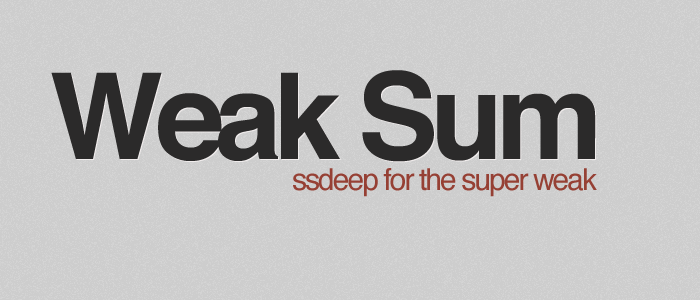
<style>
.page{position:relative;width:700px;height:300px;background:#cdcdcd}
.page>*{position:absolute;margin:0}
.t1{font:120px "Helvetica-Bold";letter-spacing:-0.065em;color:#2b2a2a}
.t2{font:30px "Helvetica";letter-spacing:-0.065em;color:#974035}
</style>
<div class="page">
<p class="t1" style="left:51px;top:70px;width:545px;height:92px">Weak Sum</p>
<p class="t1" style="left:52px;top:71px;width:545px;height:92px">Weak Sum</p>
<p class="t2" style="left:293px;top:168px;width:304px;height:29px">ssdeep for the super weak</p>
</div>
